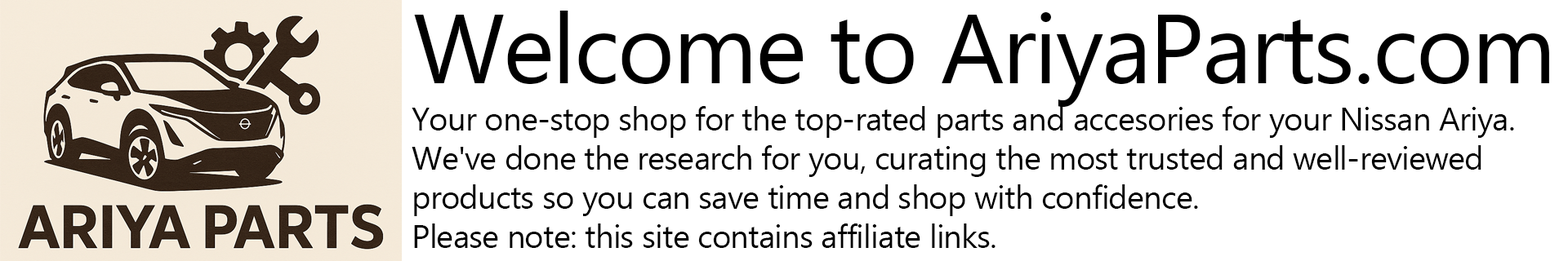
<style>
.page{position:relative;width:1568px;height:261px;background:#ffffff}
.page>*{position:absolute;margin:0}
.t1{font:98px "Ebrima";letter-spacing:-0.02em;color:#000000}
.t2{font:32.7px "Ebrima";letter-spacing:-0.02em;color:#000000}
</style>
<div class="page">
<p class="t1" style="left:414px;top:11px;width:1135px;height:96px">Welcome to AriyaParts.com</p>
<p class="t2" style="left:412px;top:106px;width:1102px;height:142px">Your one-stop shop for the top-rated parts and accesories for your Nissan Ariya. <br>We've done the research for you, curating the most trusted and well-reviewed <br>products so you can save time and shop with confidence. <br>Please note: this site contains affiliate links.</p>
</div>
